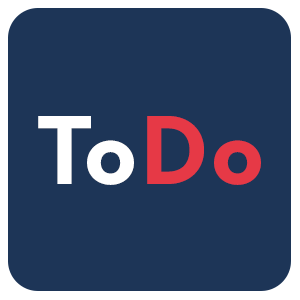
<style>
.page{position:relative;width:300px;height:300px;background:#1d3557}
.page>*{position:absolute;margin:0}
.t1{font:100px "NeutraText-Bold";letter-spacing:0.025em;color:#ffffff}
.t2{font:100px "NeutraText-Bold";letter-spacing:0.025em;color:#e63946}
</style>
<div class="page">
<p class="t1" style="left:38px;top:116px;width:223px;height:69px">To<span class="t2">Do</span></p>
</div>
